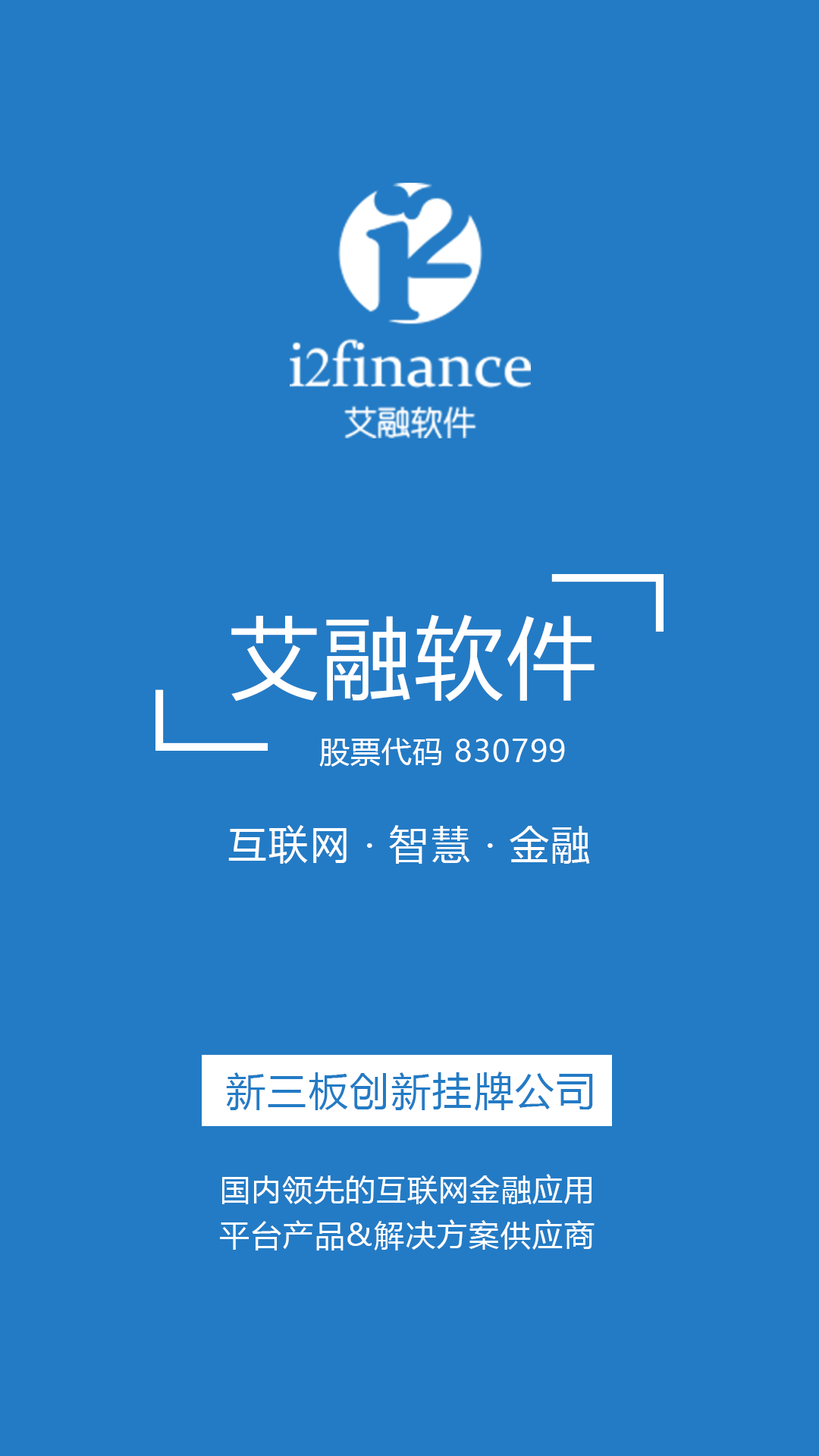
<style>
.page{position:relative;width:819px;height:1456px;background:#237bc5}
.page>*{position:absolute;margin:0}
.t1{font:88.8px "MicrosoftYaHeiUI";letter-spacing:0.04em;color:#ffffff}
.t2{font:30.1px "MicrosoftYaHeiUI";letter-spacing:0.04em;color:#ffffff}
.t3{font:39.7px "MicrosoftYaHeiUI";letter-spacing:0.04em;color:#ffffff}
.t4{font:39.7px "MicrosoftYaHeiUI";letter-spacing:0.04em;color:#237bc5}
.t5{font:30px "MicrosoftYaHeiUI";letter-spacing:0.04em;color:#ffffff}
.t6{font:30px "MicrosoftYaHeiUI";letter-spacing:0.055em;color:#ffffff}
</style>
<div class="page">
<p class="t1" style="left:231px;top:614px;width:364px;height:87px">艾融软件</p>
<p class="t2" style="left:319px;top:738px;width:246px;height:29px">股票代码 830799</p>
<p class="t3" style="left:228px;top:825px;width:362px;height:39px">互联网 · 智慧 · 金融</p>
<p class="t4" style="left:226px;top:1072px;width:367px;height:39px">新三板创新挂牌公司</p>
<p class="t5" style="left:222px;top:1174px;width:369px;height:30px">国内领先的互联网金融应用</p>
<p class="t6" style="left:220px;top:1219px;width:375px;height:31px">平台产品&amp;解决方案供应商</p>
</div>
